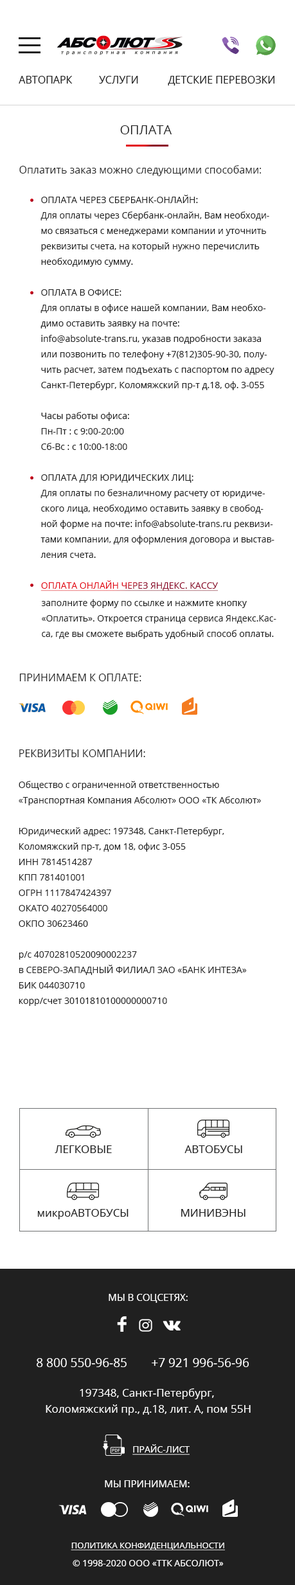
<style>
.page{position:relative;width:295px;height:1585px;background:#ffffff}
.page>*{position:absolute;margin:0}
.t1{font:12.9px "OpenSans-Regular";color:#202020;text-transform:uppercase}
.t2{font:10.3px "OpenSans-Regular";color:#202020}
.t3{font:9px/15.4px "OpenSans-Regular";color:#202020}
.t4{font:9px/15.4px "OpenSans-Regular";color:#202020;text-transform:uppercase}
.t5{font:9px/15.4px "OpenSans-Regular";color:#202020;text-transform:uppercase;text-decoration:underline}
.t6{font:9px/15.4px "OpenSans-Regular";color:#202020;text-decoration:underline}
.t7{font:9px "OpenSans-Regular";text-transform:uppercase;text-decoration:underline}
.t8{font:10.3px "OpenSans-Regular";color:#202020;text-transform:uppercase}
.t9{font:10.3px/15.4px "OpenSans-Regular";color:#202020;text-transform:uppercase}
</style>
<div class="page">
<p class="t1" style="left:120px;top:125px;width:52px;height:9px">Оплата</p>
<p class="t2" style="left:19px;top:165px;width:242px;height:11px">Оплатить заказ можно следующими способами:</p>
<p class="t3" style="left:40px;top:195px;width:234px;height:363px"><span class="t4">Оплата через Сбербанк-онлайн:<br></span>Для оплаты через Сбербанк-онлайн, Вам необходимо связаться с менеджерами компании и уточнить реквизиты счета, на который нужно перечислить необходимую сумму.<br><br><span class="t4">Оплата в офисе:<br></span>Для оплаты в офисе нашей компании, Вам необходимо оставить заявку на почте: info@absolute-trans.ru, указав подробности заказа или позвонить по телефону +7(812)305-90-30, получить расчет, затем подъехать с паспортом по адресу Санкт-Петербург, Коломяжский пр-т д.18, оф. 3-055<br><br>Часы работы офиса:<br>Пн-Пт : с 9:00-20:00<br>Сб-Вс : с 10:00-18:00<br><br><span class="t4">Оплата для юридических лиц:<br></span>Для оплаты по безналичному расчету от юридического лица, необходимо оставить заявку в свободной форме на почте: info@absolute-trans.ru реквизитами компании, для оформления договора и выставления счета.<br><span class="t5"><br></span><span class="t6"></span></p>
<p class="t7" style="left:40px;top:580px;width:179px;height:11px">Оплата онлайн через яндекс. кассу</p>
<p class="t3" style="left:41px;top:599px;width:235px;height:40px">заполните форму по ссылке и нажмите кнопку «Оплатить». Откроется страница сервиса Яндекс.Касса, где вы сможете выбрать удобный способ оплаты.</p>
<p class="t8" style="left:19px;top:674px;width:122px;height:7px">Принимаем к оплате:</p>
<p class="t3" style="left:19px;top:750px;width:242px;height:256px"><span class="t9">Реквизиты компании:<br><br></span>Общество с ограниченной ответственностью<br>«Транспортная Компания Абсолют» ООО «ТК Абсолют»<br><br>Юридический адрес: 197348, Санкт-Петербург,<br>Коломяжский пр-т, дом 18, офис 3-055<br>ИНН 7814514287<br>КПП 781401001<br>ОГРН 1117847424397<br>ОКАТО 40270564000<br>ОКПО 30623460<br><br>р/с 40702810520090002237<br>в СЕВЕРО-ЗАПАДНЫЙ ФИЛИАЛ ЗАО «БАНК ИНТЕЗА»<br>БИК 044030710<br>корр/счет 30101810100000000710</p>
</div>
